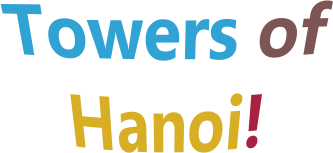
<style>
.page{position:relative;width:333px;height:153px;background:#ffffff}
.page>*{position:absolute;margin:0}
.t1{font:60px "MicrosoftTaiLe-Bold";color:#30a2d3}
.t2{font:60px "MicrosoftTaiLe-Bold";color:#7e5555}
.t3{font:60px "MicrosoftTaiLe-Bold";color:#d8ae24}
.t4{font:60px "MicrosoftTaiLe-Bold";color:#a92141}
</style>
<div class="page">
<p class="t1" style="left:0px;top:0px;width:333px;height:153px;text-align:center">Towers<span class="t2"> of </span><span class="t3">Hanoi</span><span class="t4">!</span></p>
</div>
